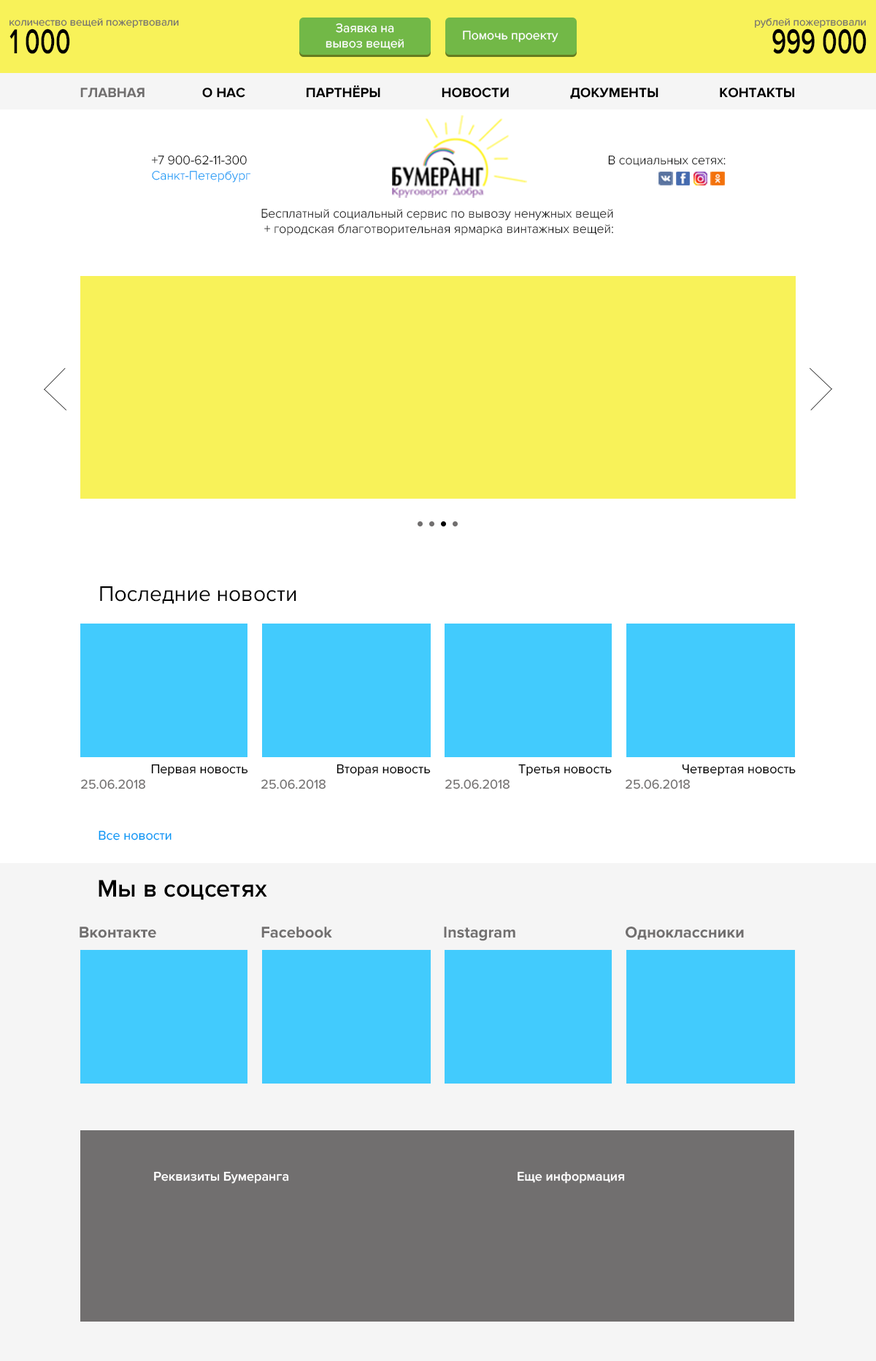
<style>
.page{position:relative;width:876px;height:1361px;background:#ffffff}
.page>*{position:absolute;margin:0}
.t1{font:11px "ProximaNova-Regular";color:#716f6f}
.t2{font:35.8px "ProximaNova-Semibold";color:#000000;scale:0.68 1}
.t3{font:12.8px "ProximaNova-Regular";color:#ffffff}
.t4{font:13.9px "ProximaNova-Bold";color:#000000}
.t5{font:13.9px "ProximaNova-Bold";color:#716f6f}
.t6{font:12.8px "ProximaNova-Light";color:#000000}
.t7{font:21.9px "ProximaNova-Regular";color:#000000}
.t8{font:13.1px "ProximaNova-Regular";color:#000000}
.t9{font:13.1px "ProximaNova-Regular";color:#716f6f}
.t10{font:13.1px "ProximaNova-Regular";color:#0099f5}
.t11{font:24.8px "ProximaNova-Semibold";color:#000000}
.t12{font:16.1px "ProximaNova-Bold";color:#716f6f}
.t13{font:13.1px "ProximaNova-Semibold";color:#ffffff}
</style>
<div class="page">
<p class="t1" style="left:755px;top:18px;width:111px;height:10px">рублей пожертвовали</p>
<p class="t1" style="left:9px;top:18px;width:170px;height:10px">количество вещей пожертвовали</p>
<p class="t2" style="left:9px;top:28px;width:61px;height:26px">1 000</p>
<p class="t3" style="left:326px;top:23px;width:78px;height:27px;text-align:center">Заявка на<br>вывоз вещей</p>
<p class="t2" style="left:772px;top:28px;width:95px;height:26px">999 000</p>
<p class="t3" style="left:463px;top:31px;width:96px;height:11px">Помочь проекту</p>
<p class="t4" style="left:80px;top:85px;width:714px;height:14px"><span class="t5">ГЛАВНАЯ                </span>О НАС                 ПАРТНЁРЫ                 НОВОСТИ                 ДОКУМЕНТЫ                 КОНТАКТЫ</p>
<p class="t6" style="left:151px;top:156px;width:100px;height:27px">+7 900-62-11-300 <br>Санкт-Петербург</p>
<p class="t6" style="left:608px;top:156px;width:118px;height:10px">В социальных сетях:</p>
<p class="t6" style="left:261px;top:209px;width:352px;height:27px;text-align:center">Бесплатный социальный сервис по вывозу ненужных вещей <br>+ городская благотворительная ярмарка винтажных вещей:</p>
<p class="t7" style="left:100px;top:586px;width:196px;height:18px">Последние новости</p>
<p class="t8" style="left:151px;top:764px;width:97px;height:12px">Первая новость</p>
<p class="t8" style="left:337px;top:764px;width:94px;height:12px">Вторая новость</p>
<p class="t8" style="left:518px;top:764px;width:94px;height:12px">Третья новость</p>
<p class="t8" style="left:682px;top:764px;width:114px;height:12px">Четвертая новость</p>
<p class="t9" style="left:81px;top:779px;width:64px;height:10px">25.06.2018</p>
<p class="t9" style="left:261px;top:779px;width:65px;height:10px">25.06.2018</p>
<p class="t9" style="left:445px;top:779px;width:65px;height:10px">25.06.2018</p>
<p class="t9" style="left:626px;top:779px;width:64px;height:10px">25.06.2018</p>
<p class="t10" style="left:99px;top:830px;width:73px;height:10px">Все новости</p>
<p class="t11" style="left:99px;top:880px;width:168px;height:20px">Мы в соцсетях</p>
<p class="t12" style="left:80px;top:927px;width:76px;height:11px">Вконтакте</p>
<p class="t12" style="left:261px;top:927px;width:71px;height:11px">Facebook</p>
<p class="t12" style="left:444px;top:927px;width:71px;height:14px">Instagram</p>
<p class="t12" style="left:626px;top:927px;width:118px;height:13px">Одноклассники</p>
<p class="t13" style="left:154px;top:1171px;width:135px;height:13px">Реквизиты Бумеранга</p>
<p class="t13" style="left:518px;top:1171px;width:107px;height:13px">Еще информация</p>
</div>
